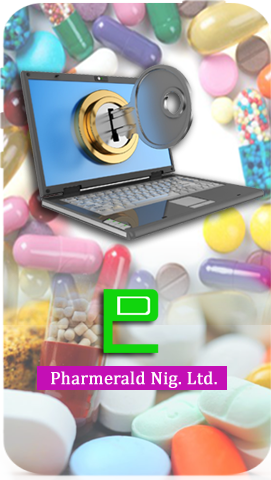
<style>
.page{position:relative;width:271px;height:480px}
.page>*{position:absolute;margin:0}
.t1{font:18px "Cambria";color:#fcfafc;font-weight:bold}
</style>
<div class="page">
<p class="t1" style="left:51px;top:371px;width:166px;height:17px">Pharmerald Nig. Ltd.</p>
</div>
